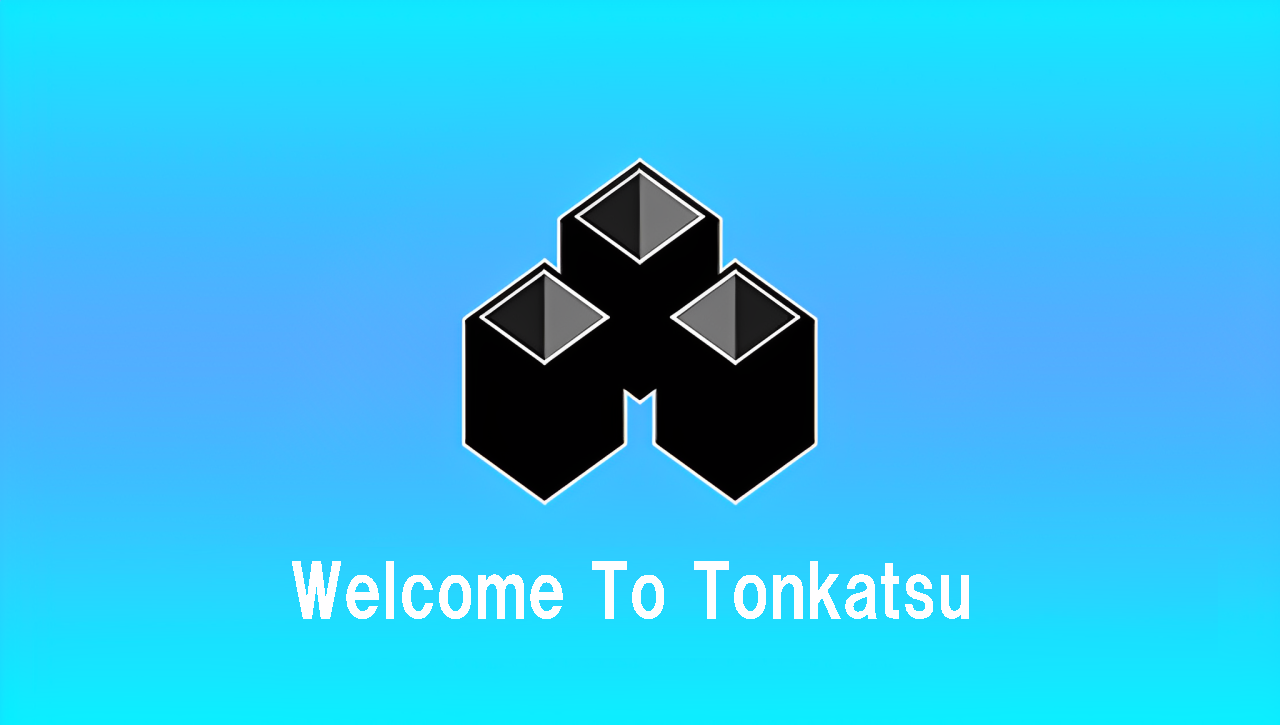
<style>
.page{position:relative;width:1280px;height:725px}
.page>*{position:absolute;margin:0}
.t1{font:72px "HGPSoeiKakugothicUB";color:#fffeff}
</style>
<div class="page">
<p class="t1" style="left:292px;top:561px;width:677px;height:58px">Welcome To Tonkatsu</p>
</div>
